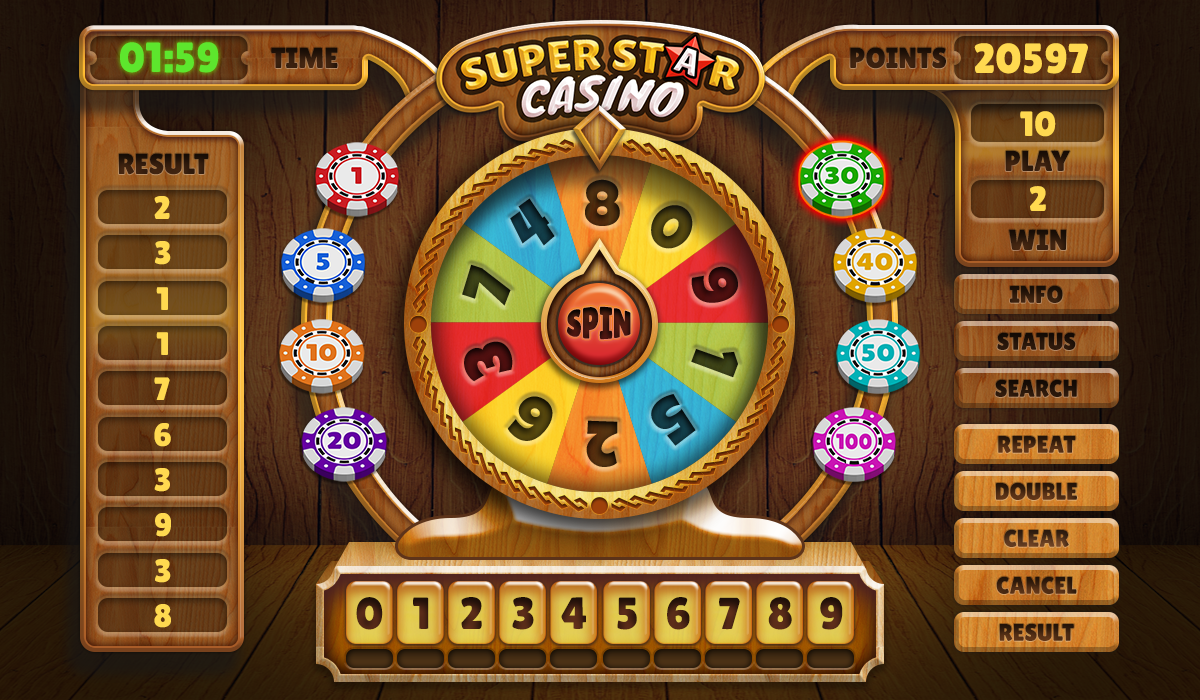
<style>
.page{position:relative;width:1200px;height:700px}
.page>*{position:absolute;margin:0}
.t1{font:42px "LilitaOne";color:#5de62d}
.t2{font:29px "LilitaOne";color:#2f1a0c}
.t3{font:42px "LilitaOne";color:#ffd950}
.t4{font:35px "LilitaOne";color:#ffd950}
.t5{font:29px "LilitaOne";color:#2c190b}
.t6{font:29px "LilitaOne";color:#301a0c}
.t7{font:32.6px "LilitaOne";color:#ffd950}
.t8{font:45px "LilitaOne";color:#ffd950}
.t9{font:29px "LilitaOne";color:#301b0c}
.t10{font:24px "LilitaOne";color:#29170a}
.t11{font:30px "LilitaOne";color:#3e150d;text-transform:uppercase}
.t12{font:24px "LilitaOne";color:#201108;text-transform:uppercase}
.t13{font:24px "LilitaOne";color:#211208;text-transform:uppercase}
.t14{font:24px "LilitaOne";text-transform:uppercase}
.t15{font:45px "LilitaOne";color:#472314}
.t16{font:45px "LilitaOne"}
.t17{font:45px "LilitaOne";color:#4e2616}
</style>
<div class="page">
<p class="t1" style="left:120px;top:42px;width:99px;height:31px">01:59</p>
<p class="t2" style="left:271px;top:47px;width:67px;height:21px">TIME</p>
<p class="t2" style="left:850px;top:47px;width:96px;height:22px">POINTS</p>
<p class="t3" style="left:974px;top:43px;width:114px;height:31px">20597</p>
<p class="t4" style="left:1020px;top:111px;width:36px;height:26px">10</p>
<p class="t5" style="left:1005px;top:150px;width:65px;height:21px">PLAY</p>
<p class="t6" style="left:119px;top:153px;width:90px;height:22px">RESULT</p>
<p class="t7" style="left:154px;top:196px;width:16px;height:23px">2</p>
<p class="t4" style="left:1030px;top:186px;width:16px;height:25px"><span class="t8">   </span>2</p>
<p class="t9" style="left:1009px;top:229px;width:57px;height:21px">WIN</p>
<p class="t7" style="left:155px;top:241px;width:16px;height:24px">3</p>
<p class="t7" style="left:156px;top:287px;width:12px;height:23px">1</p>
<p class="t10" style="left:1010px;top:285px;width:53px;height:18px">INFO</p>
<p class="t11" style="left:567px;top:306px;width:64px;height:34px">SPIN</p>
<p class="t7" style="left:156px;top:332px;width:12px;height:23px">1</p>
<p class="t12" style="left:997px;top:332px;width:79px;height:18px">status</p>
<p class="t7" style="left:154px;top:377px;width:16px;height:23px">7</p>
<p class="t13" style="left:995px;top:379px;width:82px;height:18px">search</p>
<p class="t7" style="left:154px;top:423px;width:17px;height:24px">6</p>
<p class="t14" style="left:998px;top:436px;width:78px;height:17px">Repeat</p>
<p class="t7" style="left:154px;top:468px;width:16px;height:24px">3</p>
<p class="t14" style="left:996px;top:482px;width:81px;height:18px">double</p>
<p class="t7" style="left:155px;top:513px;width:16px;height:24px">9</p>
<p class="t14" style="left:1004px;top:529px;width:65px;height:18px">clear</p>
<p class="t7" style="left:155px;top:559px;width:16px;height:24px">3</p>
<p class="t14" style="left:996px;top:576px;width:81px;height:18px">cancel</p>
<p class="t7" style="left:154px;top:604px;width:17px;height:24px">8</p>
<p class="t15" style="left:356px;top:597px;width:27px;height:33px">0</p>
<p class="t16" style="left:413px;top:597px;width:16px;height:32px">1</p>
<p class="t16" style="left:461px;top:597px;width:21px;height:32px">2</p>
<p class="t16" style="left:512px;top:597px;width:22px;height:33px">3</p>
<p class="t16" style="left:561px;top:597px;width:25px;height:32px">4</p>
<p class="t16" style="left:617px;top:597px;width:20px;height:33px">5</p>
<p class="t16" style="left:667px;top:597px;width:23px;height:33px">6</p>
<p class="t16" style="left:719px;top:597px;width:21px;height:33px">7</p>
<p class="t17" style="left:768px;top:597px;width:24px;height:33px">8</p>
<p class="t16" style="left:820px;top:597px;width:23px;height:33px">9</p>
<p class="t14" style="left:999px;top:623px;width:75px;height:18px">result</p>
</div>
